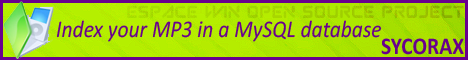
<style>
.page{position:relative;width:468px;height:60px}
.page>*{position:absolute;margin:0}
.t1{font:18px "SubatomicTsoonami";color:#a1d100;scale:0.9 1}
.t2{font:24px "Calibri-Italic";color:#69008e;scale:0.9 1}
.t3{font:24px "Calibri-Bold";color:#69008e;scale:0.9 1}
</style>
<div class="page">
<p class="t1" style="left:127px;top:5px;width:337px;height:13px">ESPACE WIN OPEN SOURCE PROJECT</p>
<p class="t2" style="left:56px;top:20px;width:326px;height:22px">Index your MP3 in a MySQL database</p>
<p class="t3" style="left:381px;top:38px;width:83px;height:17px">SYCORAX</p>
</div>
